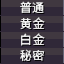
<style>
.page{position:relative;width:64px;height:64px;background:#302838}
.page>*{position:absolute;margin:0}
.t1{font:12px/16px "SourceHanSansSC-Regular";letter-spacing:0.06em;color:#ffffff}
</style>
<div class="page">
<p class="t1" style="left:20px;top:1px;width:25px;height:60px;text-align:center">普通<br>黄金<br>白金<br>秘密</p>
</div>
